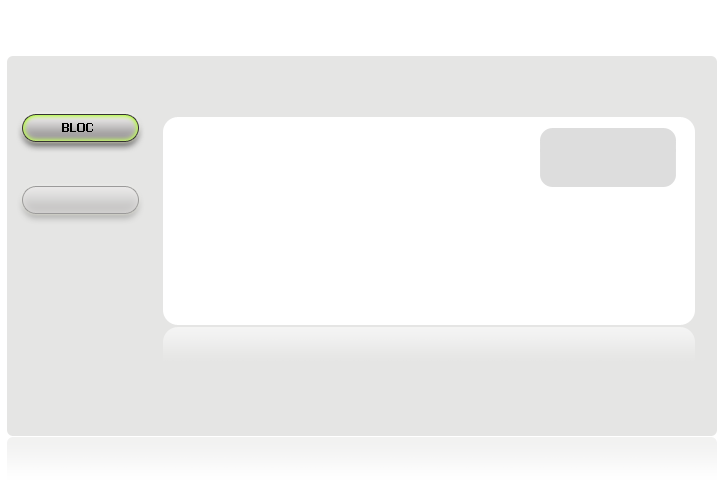
<style>
.page{position:relative;width:728px;height:500px;background:#ffffff}
.page>*{position:absolute;margin:0}
.t1{font:12px "Tahoma-Bold";color:#000000}
</style>
<div class="page">
<p class="t1" style="left:62px;top:123px;width:31px;height:9px">BLOC</p>
</div>
